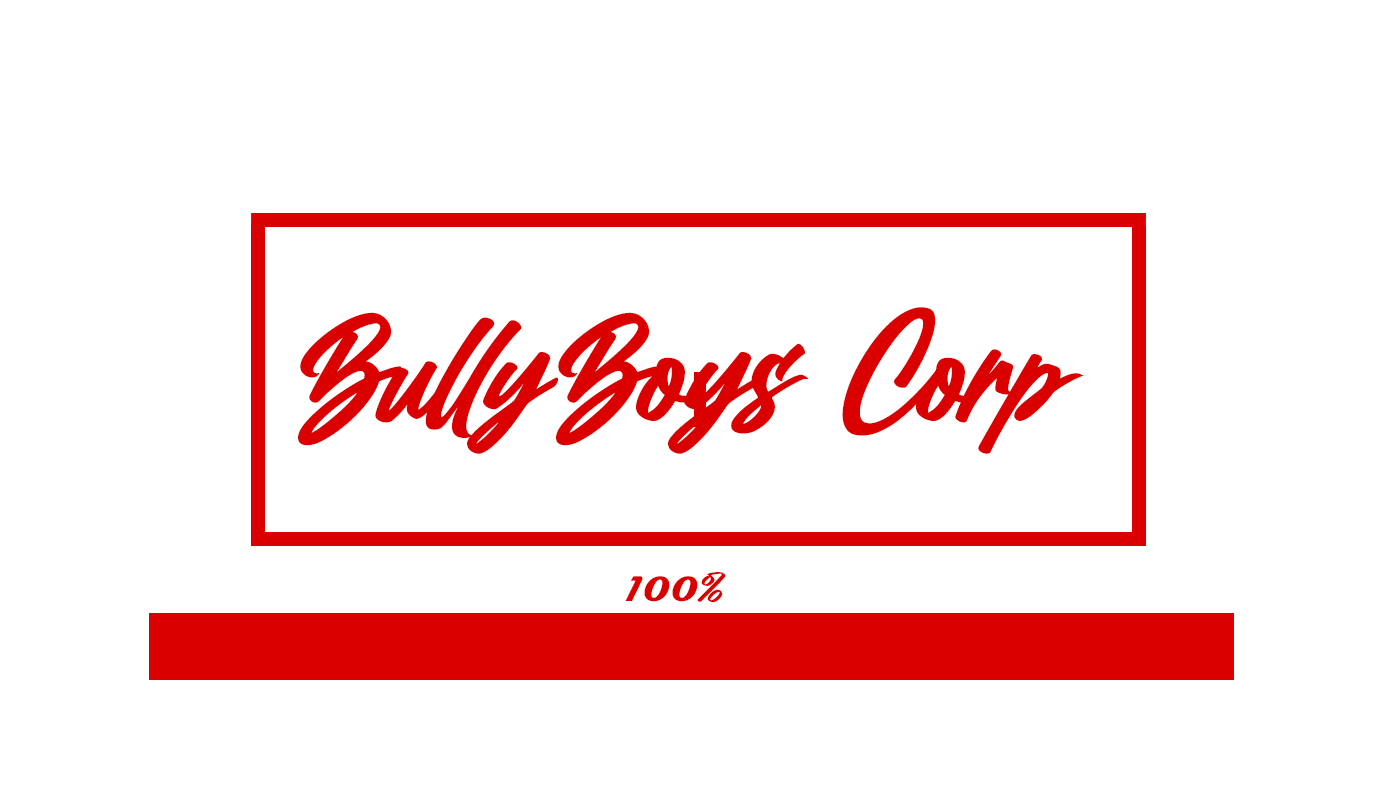
<style>
.page{position:relative;width:1400px;height:800px;background:#ffffff}
.page>*{position:absolute;margin:0}
.t1{font:150px "BillionDreams";color:#db0000;font-style:italic}
.t2{font:36px "Magneto-Bold";color:#db0000;font-style:italic}
.t3{font:36px "BillionDreams";color:#db0000;font-style:italic}
</style>
<div class="page">
<p class="t1" style="left:298px;top:307px;width:786px;height:147px">BullyBoys Corp</p>
<p class="t2" style="left:625px;top:572px;width:101px;height:31px">100<span class="t3">%</span></p>
</div>
